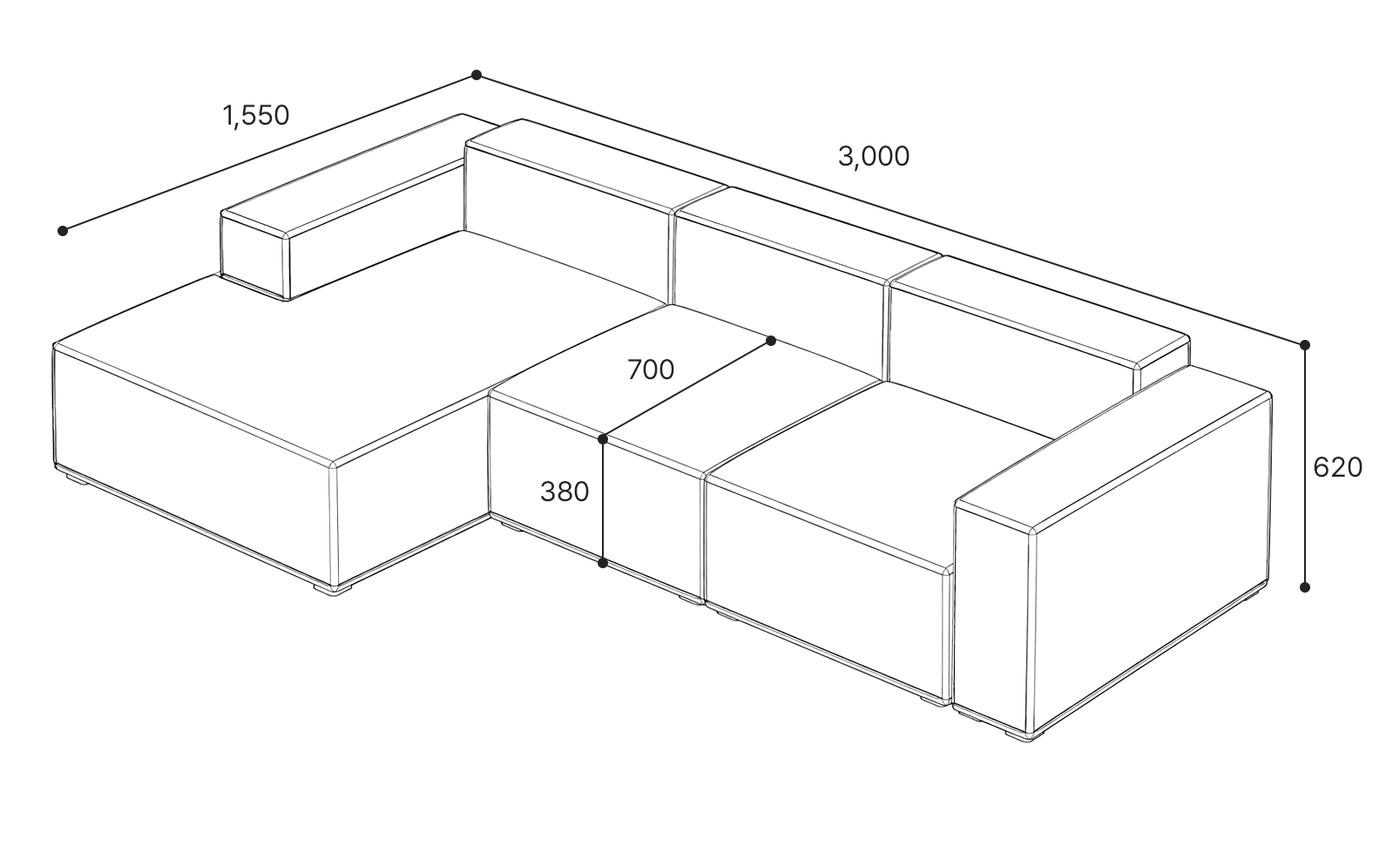
<style>
.page{position:relative;width:1386px;height:861px;background:#ffffff}
.page>*{position:absolute;margin:0}
.t1{font:27.9px "Pretendard-Regular";color:#222222}
</style>
<div class="page">
<p class="t1" style="left:223px;top:105px;width:66px;height:26px">1,550</p>
<p class="t1" style="left:839px;top:145px;width:70px;height:27px">3,000</p>
<p class="t1" style="left:628px;top:359px;width:46px;height:21px">700</p>
<p class="t1" style="left:1313px;top:456px;width:49px;height:21px">620</p>
<p class="t1" style="left:541px;top:481px;width:48px;height:21px">380</p>
</div>
